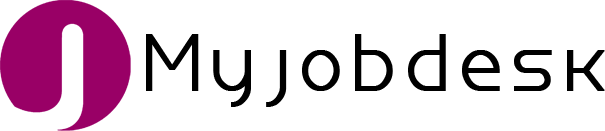
<style>
.page{position:relative;width:605px;height:131px;background:#ffffff}
.page>*{position:absolute;margin:0}
.t1{font:80px "KolnMesseDeutz";letter-spacing:0.14em;color:#000000;font-weight:bold}
</style>
<div class="page">
<p class="t1" style="left:146px;top:34px;width:459px;height:73px">Myjobdesk</p>
</div>
